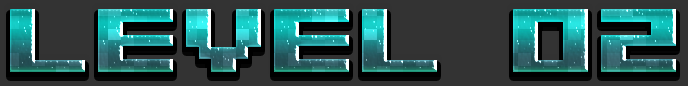
<style>
.page{position:relative;width:688px;height:86px;background:#333333}
.page>*{position:absolute;margin:0}
.t1{font:100px "04b09";text-transform:uppercase}
</style>
<div class="page">
<p class="t1" style="left:10px;top:9px;width:666px;height:63px">LEVEL 02</p>
</div>
